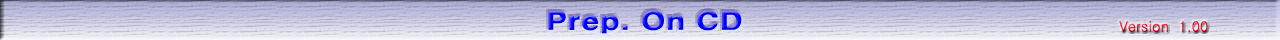
<style>
.page{position:relative;width:1280px;height:40px}
.page>*{position:absolute;margin:0}
.t1{font:24px "H2gtrE";scale:1.25 1}
.t2{font:24px "Gulim";scale:1.25 1}
.t3{font:14.4px "Gulim"}
</style>
<div class="page">
<p class="t1" style="left:548px;top:10px;width:194px;height:24px"><span class="t2"> </span>Prep. On CD</p>
<p class="t3" style="left:1119px;top:21px;width:89px;height:11px">Version  1.00</p>
</div>
